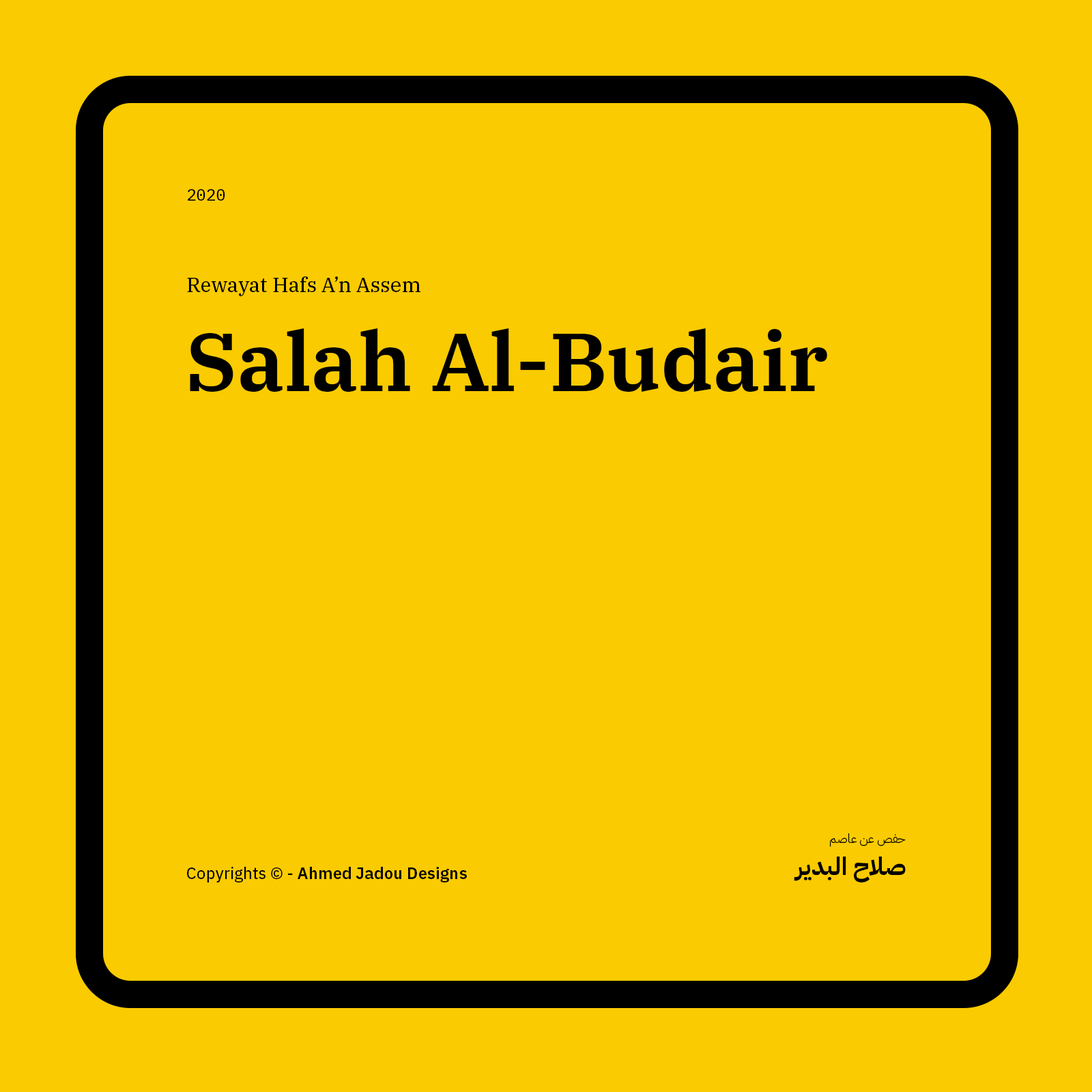
<style>
.page{position:relative;width:1092px;height:1092px;background:#facb00}
.page>*{position:absolute;margin:0}
.t1{font:16.4px "IBMPlexMono-Text";color:#000000}
.t2{font:20.5px "IBMPlexSerif-Text";color:#000000}
.t3{font:81.9px "IBMPlexSerif-SemiBold";color:#000000}
.t4{font:12.3px "IBMPlexArabic-Light";color:#000000}
.t5{font:24.6px "IBMPlexArabic-Bold";color:#000000}
.t6{font:16.4px "IBMPlexSans-SemiBold";color:#000000}
.t7{font:16.4px "IBMPlexSans-Text";color:#000000}
</style>
<div class="page">
<p class="t1" style="left:188px;top:189px;width:37px;height:12px">2020</p>
<p class="t2" style="left:187px;top:276px;width:233px;height:20px">Rewayat Hafs A’n Assem</p>
<p class="t3" style="left:190px;top:328px;width:637px;height:64px">Salah Al-Budair</p>
<p class="t4" style="left:830px;top:833px;width:76px;height:14px">حفص عن عاصم</p>
<p class="t5" style="left:794px;top:857px;width:112px;height:25px">صلاح البدير</p>
<p class="t6" style="left:187px;top:867px;width:280px;height:15px"><span class="t7">Copyrights © - </span>Ahmed Jadou Designs</p>
</div>
